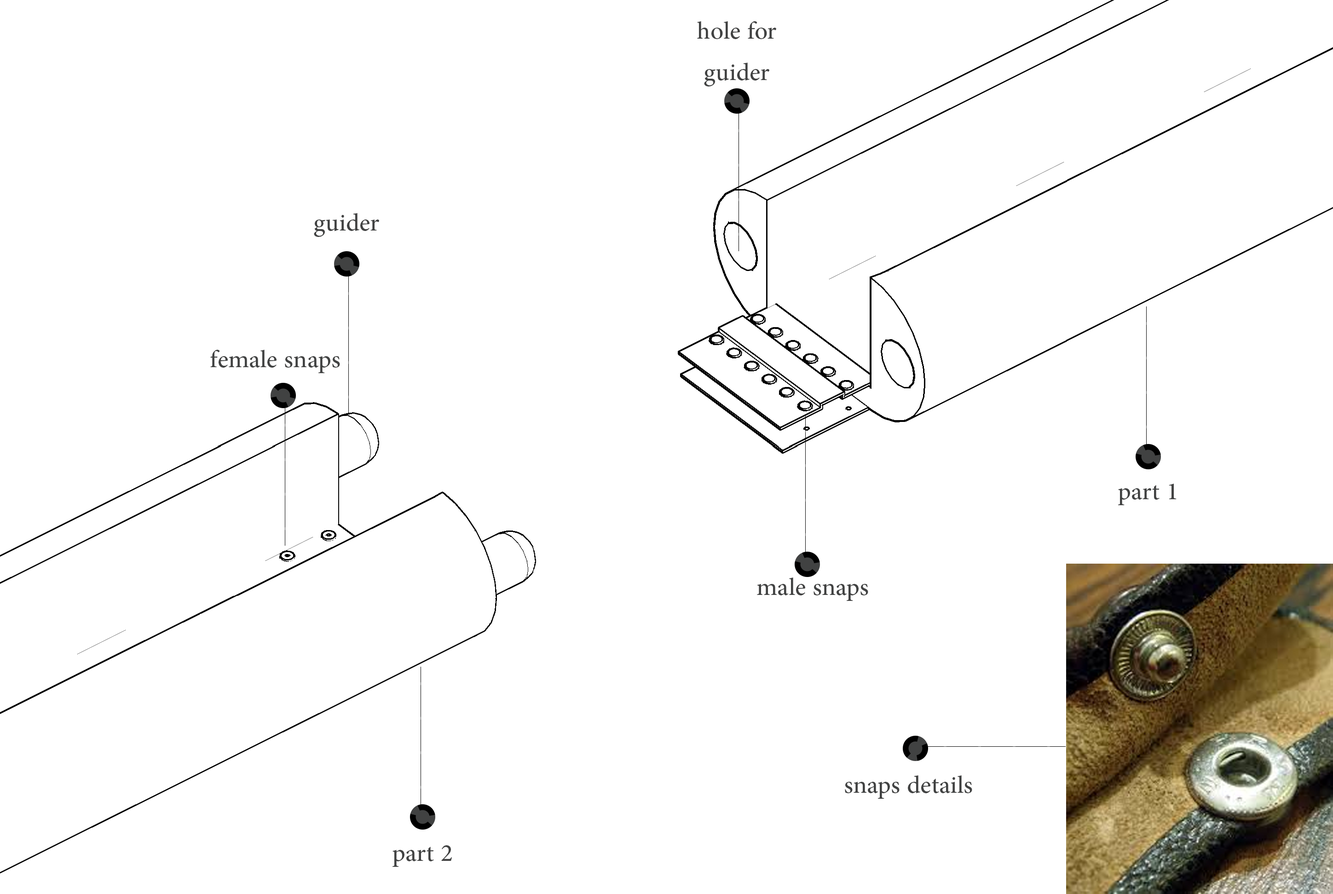
<style>
.page{position:relative;width:1333px;height:894px;background:#ffffff}
.page>*{position:absolute;margin:0}
.t1{font:34.5px "AdobeArabic-Regular";color:#414242}
</style>
<div class="page">
<p class="t1" style="left:697px;top:21px;width:79px;height:66px;text-align:center">hole for guider</p>
<p class="t1" style="left:314px;top:213px;width:65px;height:24px">guider</p>
<p class="t1" style="left:210px;top:350px;width:130px;height:23px">female snaps</p>
<p class="t1" style="left:1118px;top:484px;width:59px;height:21px">part 1</p>
<p class="t1" style="left:757px;top:578px;width:112px;height:23px">male snaps</p>
<p class="t1" style="left:845px;top:776px;width:128px;height:23px">snaps details</p>
<p class="t1" style="left:393px;top:846px;width:59px;height:21px">part 2</p>
</div>
